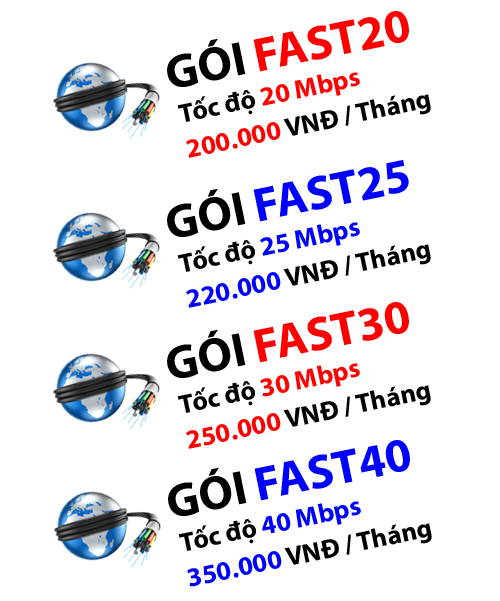
<style>
.page{position:relative;width:500px;height:601px;background:#ffffff}
.page>*{position:absolute;margin:0}
.t1{font:47.9px "MyriadPro-Bold";color:#ff0000}
.t2{font:47.9px "MyriadPro-Bold";color:#000000}
.t3{font:26.6px "MyriadPro-Bold";color:#ff0000}
.t4{font:26.6px "MyriadPro-Bold";color:#000000}
.t5{font:47.9px "MyriadPro-Bold";color:#0000fe}
.t6{font:26.6px "MyriadPro-Bold";color:#0000fe}
</style>
<div class="page">
<p class="t1" style="left:167px;top:11px;width:242px;height:76px;rotate:-12deg"><span class="t2">GÓI</span> FAST20</p>
<p class="t3" style="left:177px;top:72px;width:183px;height:50px;rotate:-12deg"><span class="t4">Tốc độ </span>20 Mbps</p>
<p class="t4" style="left:186px;top:94px;width:245px;height:64px;rotate:-12deg"><span class="t3">200.000 </span>VNĐ / Tháng</p>
<p class="t5" style="left:167px;top:160px;width:242px;height:77px;rotate:-12deg"><span class="t2">GÓI </span>FAST25</p>
<p class="t6" style="left:177px;top:222px;width:183px;height:50px;rotate:-12deg"><span class="t4">Tốc độ </span>25 Mbps</p>
<p class="t4" style="left:186px;top:244px;width:245px;height:64px;rotate:-12deg"><span class="t6">220.000 </span>VNĐ / Tháng</p>
<p class="t1" style="left:167px;top:302px;width:242px;height:76px;rotate:-12deg"><span class="t2">GÓI</span> FAST30</p>
<p class="t3" style="left:177px;top:363px;width:183px;height:50px;rotate:-12deg"><span class="t4">Tốc độ </span>30 Mbps</p>
<p class="t4" style="left:186px;top:385px;width:245px;height:64px;rotate:-12deg"><span class="t3">250.000 </span>VNĐ / Tháng</p>
<p class="t5" style="left:168px;top:440px;width:242px;height:76px;rotate:-12deg"><span class="t2">GÓI </span>FAST40</p>
<p class="t6" style="left:178px;top:501px;width:183px;height:50px;rotate:-12deg"><span class="t4">Tốc độ </span>40 Mbps</p>
<p class="t4" style="left:187px;top:523px;width:245px;height:64px;rotate:-12deg"><span class="t6">350.000 </span>VNĐ / Tháng</p>
</div>
